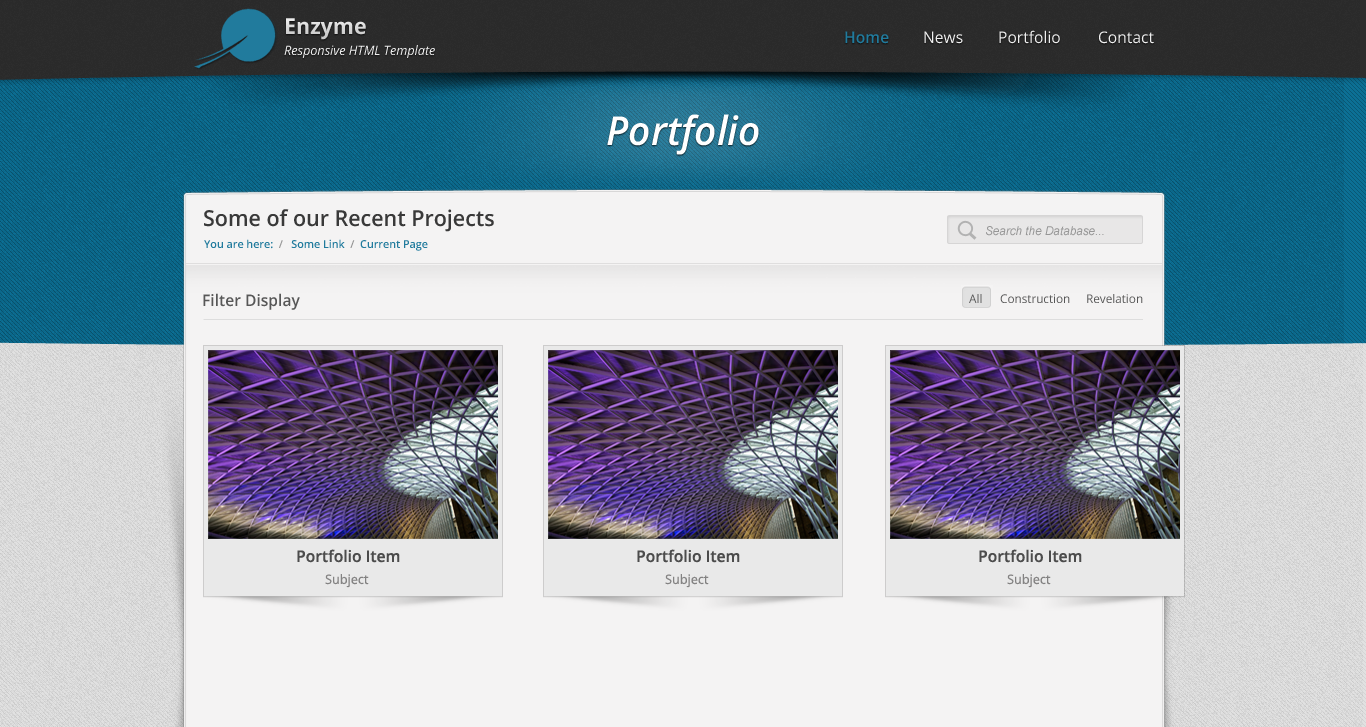
<style>
.page{position:relative;width:1366px;height:727px;background:#f4f3f3}
.page>*{position:absolute;margin:0}
.t1{font:22px "OpenSans-Bold";color:#d9d9d9}
.t2{font:16px "OpenSans";color:#efefef}
.t3{font:16px "OpenSans-Semibold";color:#217b9d}
.t4{font:13px "OpenSans-Italic";color:#efefef}
.t5{font:40px "OpenSans-SemiboldItalic";color:#ffffff}
.t6{font:22px "OpenSans-Semibold";color:#393939}
.t7{font:12px "Arial-ItalicMT";color:#979797}
.t8{font:11px "OpenSans-Semibold";color:#217b9d}
.t9{font:11px "OpenSans-Semibold";color:#949494}
.t10{font:16px "OpenSans-Semibold";color:#575757}
.t11{font:12px "OpenSans";color:#575757}
.t12{font:16px "OpenSans-Semibold";color:#4c4c4c}
.t13{font:13px "OpenSans";color:#838282}
</style>
<div class="page">
<p class="t1" style="left:286px;top:18px;width:80px;height:22px">Enzyme</p>
<p class="t2" style="left:999px;top:30px;width:61px;height:14px">Portfolio</p>
<p class="t3" style="left:845px;top:31px;width:44px;height:13px">Home</p>
<p class="t2" style="left:924px;top:31px;width:39px;height:13px">News</p>
<p class="t2" style="left:1099px;top:31px;width:55px;height:13px">Contact</p>
<p class="t4" style="left:284px;top:45px;width:151px;height:13px">Responsive HTML Template</p>
<p class="t5" style="left:607px;top:114px;width:152px;height:41px">Portfolio</p>
<p class="t6" style="left:204px;top:209px;width:290px;height:23px">Some of our Recent Projects</p>
<p class="t7" style="left:986px;top:226px;width:118px;height:10px">Search the Database...</p>
<p class="t8" style="left:204px;top:239px;width:224px;height:12px">You are here:  <span class="t9">/   </span>Some Link  <span class="t9">/  </span>Current Page</p>
<p class="t10" style="left:203px;top:293px;width:97px;height:17px">Filter Display</p>
<p class="t11" style="left:969px;top:294px;width:13px;height:9px">All</p>
<p class="t11" style="left:1000px;top:294px;width:70px;height:9px">Construction</p>
<p class="t11" style="left:1087px;top:294px;width:56px;height:9px">Revelation</p>
<p class="t12" style="left:297px;top:549px;width:103px;height:14px">Portfolio Item</p>
<p class="t12" style="left:637px;top:549px;width:103px;height:14px">Portfolio Item</p>
<p class="t12" style="left:979px;top:549px;width:103px;height:14px">Portfolio Item</p>
<p class="t13" style="left:325px;top:574px;width:44px;height:14px">Subject</p>
<p class="t13" style="left:665px;top:574px;width:44px;height:14px">Subject</p>
<p class="t13" style="left:1007px;top:574px;width:44px;height:14px">Subject</p>
</div>
